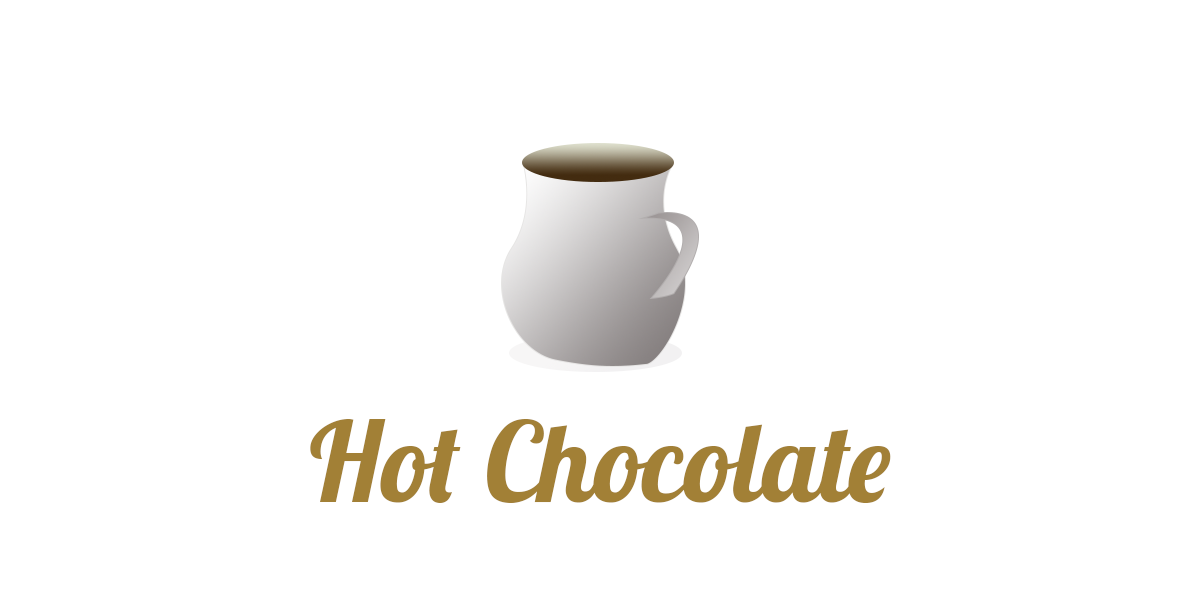
<style>
.page{position:relative;width:1200px;height:600px;background:#ffffff}
.page>*{position:absolute;margin:0}
.t1{font:110px "Lobster-Regular";color:#a28036}
</style>
<div class="page">
<p class="t1" style="left:310px;top:419px;width:581px;height:84px">Hot Chocolate</p>
<p class="t1" style="left:310px;top:419px;width:581px;height:84px">Hot Chocolate</p>
</div>
